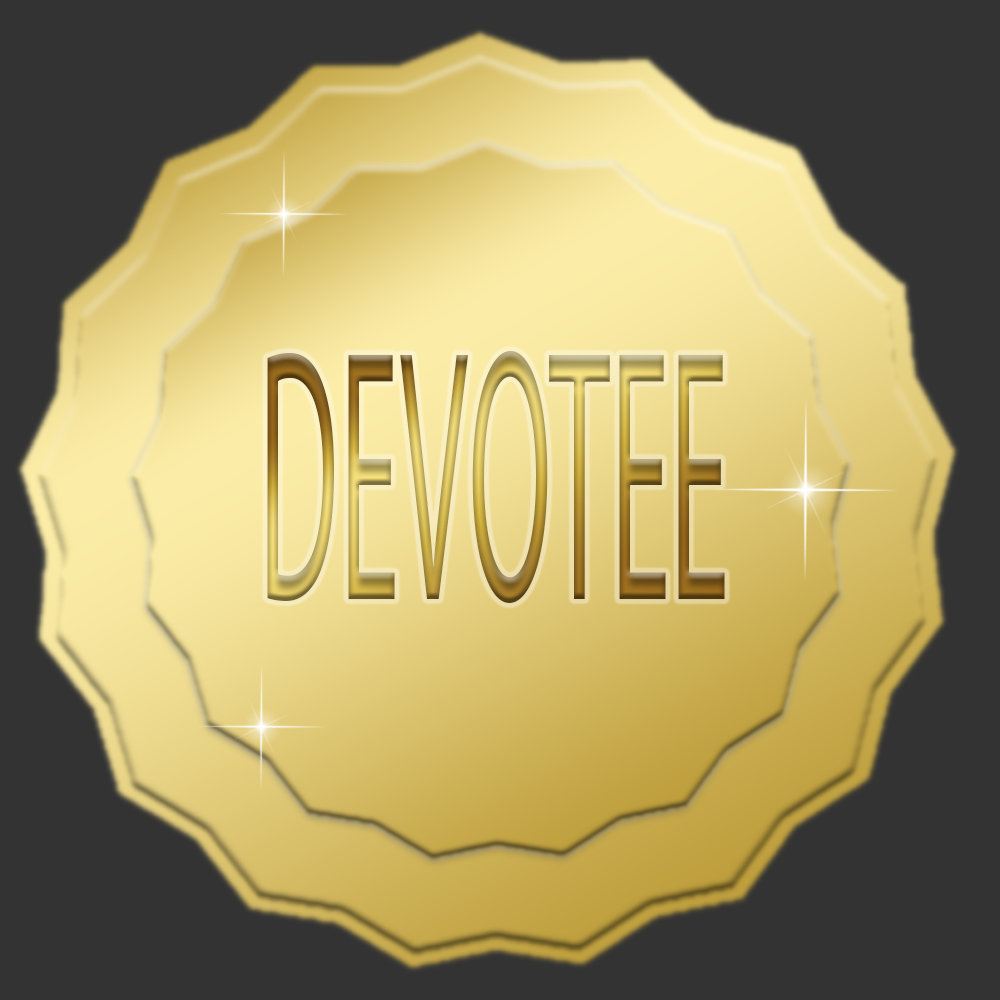
<style>
.page{position:relative;width:1000px;height:1000px;background:#333333}
.page>*{position:absolute;margin:0}
.t1{font:361.4px "MyriadPro-Regular";scale:0.34 1}
</style>
<div class="page">
<p class="t1" style="left:267px;top:350px;width:458px;height:254px">DEVOTEE</p>
</div>
